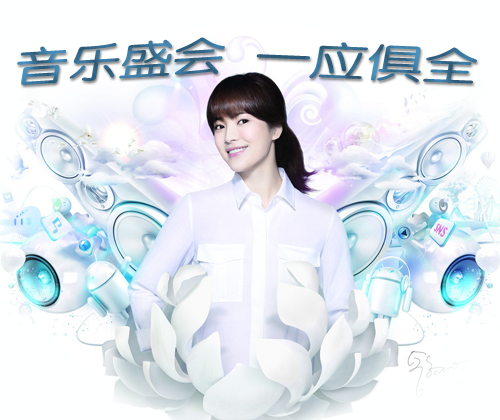
<style>
.page{position:relative;width:500px;height:420px;background:#feffff}
.page>*{position:absolute;margin:0}
.t1{font:40.7px "FZY3JW--GB1-0";scale:1.3 1}
.t2{font:40.1px "FZY3JW--GB1-0";scale:1.4 1}
</style>
<div class="page">
<p class="t1" style="left:17px;top:37px;width:208px;height:48px;rotate:-3deg">音乐盛会</p>
<p class="t2" style="left:256px;top:42px;width:221px;height:42px;rotate:2deg">一应俱全</p>
</div>
